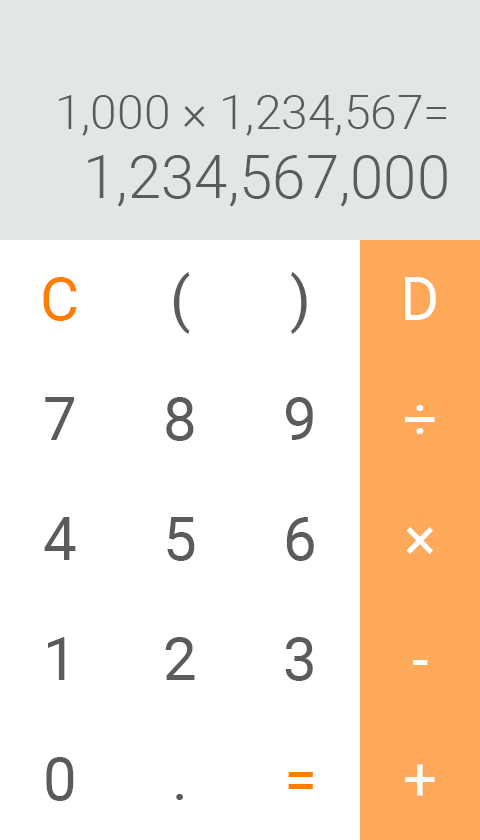
<style>
.page{position:relative;width:480px;height:840px;background:#ffffff}
.page>*{position:absolute;margin:0}
.t1{font:48px "Roboto-Light";color:#5b5b5b}
.t2{font:60px "Roboto-Light";color:#5b5b5b}
.t3{font:60px "Roboto-Regular";color:#ff7d00}
.t4{font:60px "Roboto-Regular";color:#5b5b5b}
.t5{font:60px "Roboto-Regular";color:#ffffff}
.t6{font:60px "Roboto-Regular";color:#f9fbfb}
</style>
<div class="page">
<p class="t1" style="left:59px;top:95px;width:387px;height:41px">1,000 × 1,234,567=</p>
<p class="t2" style="left:88px;top:155px;width:359px;height:52px">1,234,567,000</p>
<p class="t3" style="left:43px;top:277px;width:34px;height:44px">C</p>
<p class="t4" style="left:173px;top:272px;width:17px;height:62px">(</p>
<p class="t4" style="left:291px;top:272px;width:16px;height:62px">)</p>
<p class="t5" style="left:405px;top:277px;width:31px;height:43px">D</p>
<p class="t4" style="left:45px;top:397px;width:30px;height:43px">7</p>
<p class="t4" style="left:166px;top:397px;width:28px;height:44px">8</p>
<p class="t4" style="left:285px;top:397px;width:28px;height:43px">9</p>
<p class="t5" style="left:405px;top:405px;width:30px;height:29px">÷</p>
<p class="t4" style="left:44px;top:517px;width:32px;height:43px">4</p>
<p class="t4" style="left:167px;top:517px;width:28px;height:44px">5</p>
<p class="t4" style="left:286px;top:517px;width:28px;height:44px">6</p>
<p class="t5" style="left:406px;top:527px;width:27px;height:27px">×</p>
<p class="t4" style="left:48px;top:637px;width:17px;height:43px">1</p>
<p class="t4" style="left:165px;top:637px;width:30px;height:43px">2</p>
<p class="t4" style="left:285px;top:637px;width:28px;height:44px">3</p>
<p class="t5" style="left:413px;top:660px;width:15px;height:5px">-</p>
<p class="t4" style="left:46px;top:757px;width:28px;height:44px">0</p>
<p class="t3" style="left:288px;top:772px;width:25px;height:17px">=</p>
<p class="t6" style="left:405px;top:764px;width:30px;height:32px">+</p>
<p class="t4" style="left:176px;top:794px;width:7px;height:6px">.</p>
</div>
